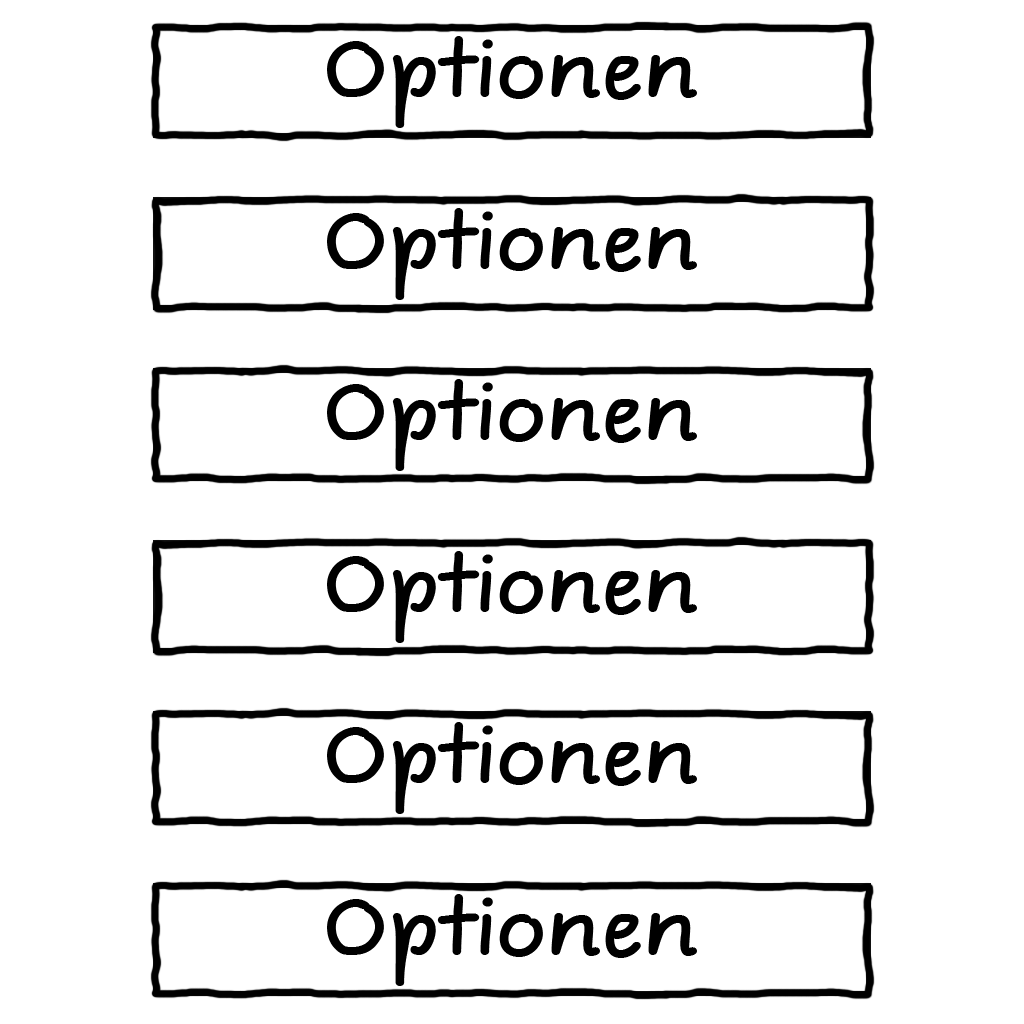
<style>
.page{position:relative;width:1024px;height:1024px;background:#ffffff}
.page>*{position:absolute;margin:0}
.t1{font:78.1px "ComicJensFreePro";color:#000000;scale:1.13 1}
</style>
<div class="page">
<p class="t1" style="left:327px;top:36px;width:370px;height:92px">Optionen</p>
<p class="t1" style="left:327px;top:208px;width:370px;height:92px">Optionen</p>
<p class="t1" style="left:327px;top:379px;width:370px;height:92px">Optionen</p>
<p class="t1" style="left:327px;top:551px;width:370px;height:92px">Optionen</p>
<p class="t1" style="left:327px;top:722px;width:370px;height:92px">Optionen</p>
<p class="t1" style="left:327px;top:894px;width:370px;height:92px">Optionen</p>
</div>
